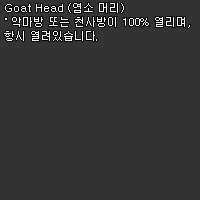
<style>
.page{position:relative;width:200px;height:200px;background:#333333}
.page>*{position:absolute;margin:0}
.t1{font:11px/14px "Dotum";color:#ffffff}
</style>
<div class="page">
<p class="t1" style="left:4px;top:3px;width:186px;height:38px">Goat Head (염소 머리)<br>˚ 악마방 또는 천사방이 100% 열리며,<br>항시 열려있습니다.</p>
</div>
